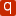
<style>
.page{position:relative;width:16px;height:16px;background:#c72800}
.page>*{position:absolute;margin:0}
.t1{font:15px "OpenSans-Light";color:#ffffff}
</style>
<div class="page">
<p class="t1" style="left:4px;top:2px;width:7px;height:12px">q</p>
</div>
